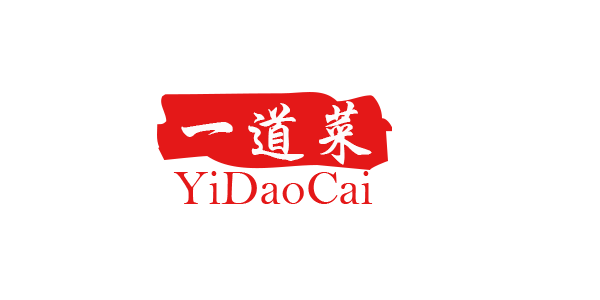
<style>
.page{position:relative;width:600px;height:300px;background:#ffffff}
.page>*{position:absolute;margin:0}
.t1{font:66.7px "STXingkai";color:#fdfcfc}
.t2{font:50px "BellMT";color:#e41818}
</style>
<div class="page">
<p class="t1" style="left:181px;top:101px;width:191px;height:64px">一道菜</p>
<p class="t2" style="left:173px;top:171px;width:200px;height:33px">YiDaoCai</p>
</div>
